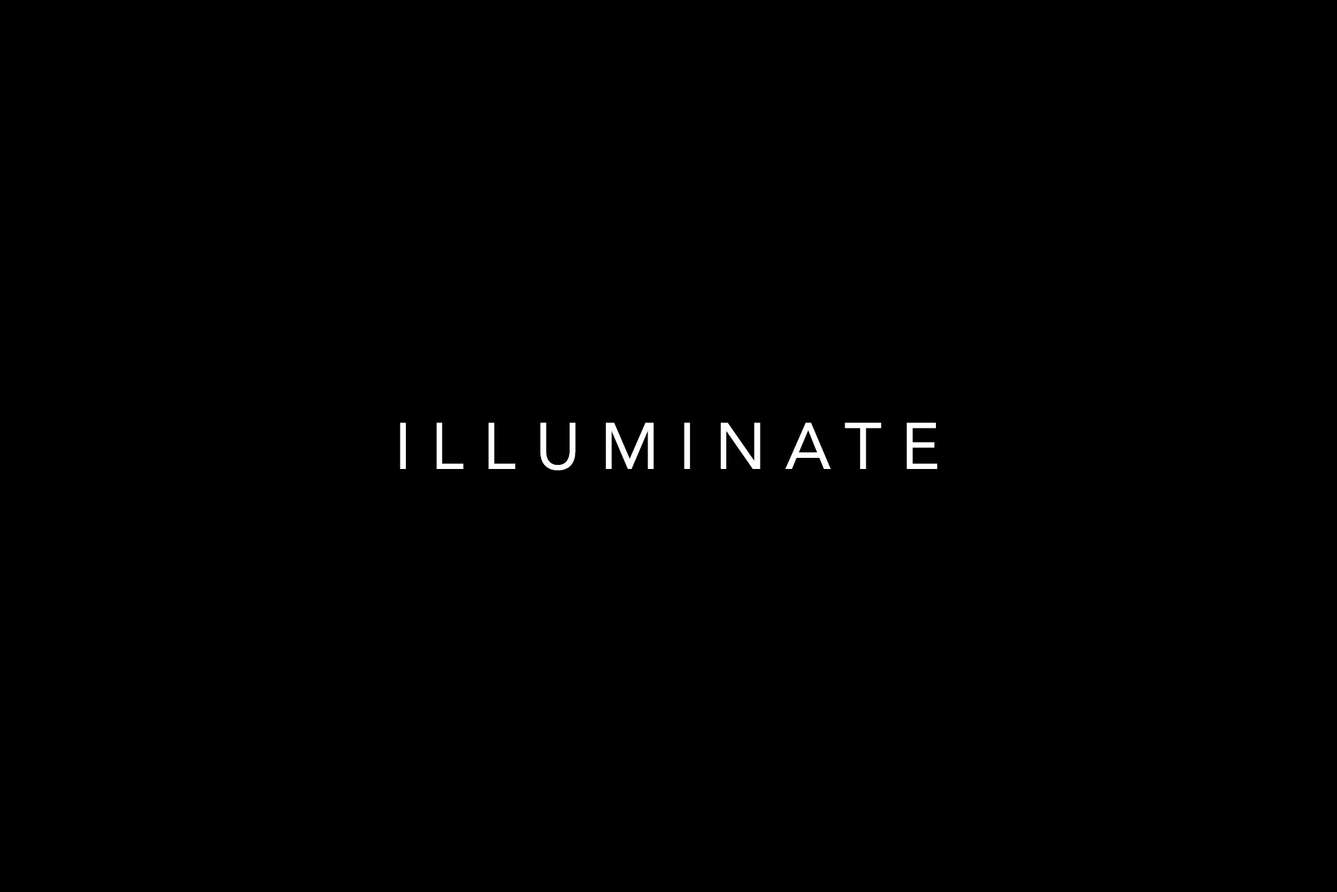
<style>
.page{position:relative;width:1337px;height:892px;background:#000000}
.page>*{position:absolute;margin:0}
.t1{font:65px "Avenir-Roman";letter-spacing:0.3em;color:#ffffff;text-transform:uppercase}
</style>
<div class="page">
<p class="t1" style="left:400px;top:422px;width:538px;height:48px">ILLUMINATE</p>
</div>
